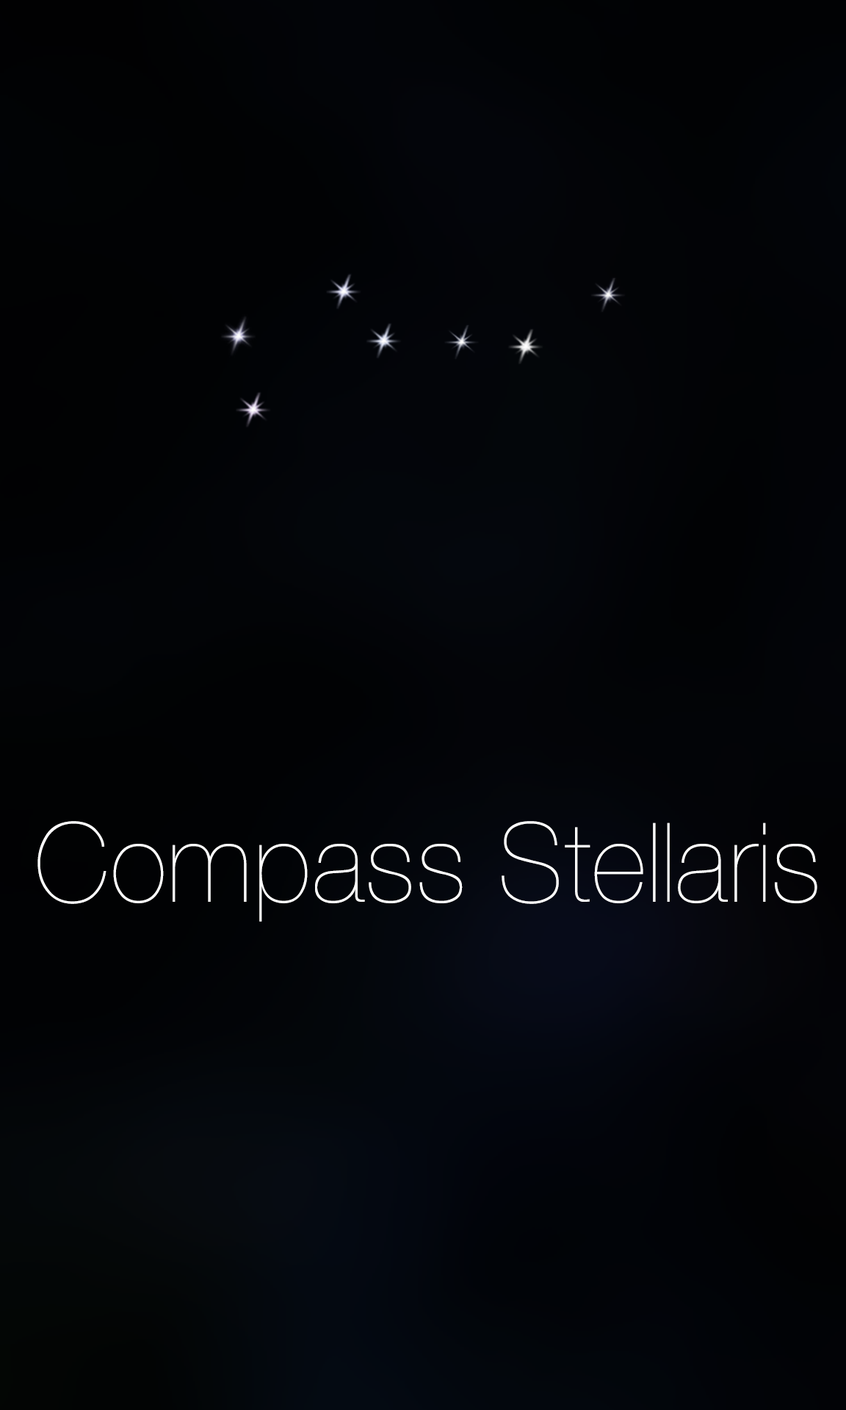
<style>
.page{position:relative;width:846px;height:1410px}
.page>*{position:absolute;margin:0}
.t1{font:110.1px "HelveticaNeueLT-UltraLight";color:#ffffff}
</style>
<div class="page">
<p class="t1" style="left:37px;top:821px;width:780px;height:100px">Compass Stellaris</p>
</div>
